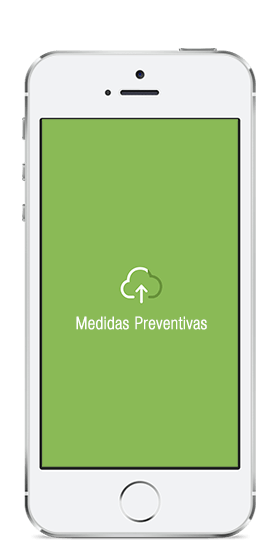
<style>
.page{position:relative;width:280px;height:560px;background:#8aba56}
.page>*{position:absolute;margin:0}
.t1{font:17px "HelveticaNeueLTStd-ThCn";letter-spacing:0.025em;color:#ffffff;font-weight:bold}
</style>
<div class="page">
<p class="t1" style="left:76px;top:316px;width:131px;height:14px">Medidas Preventivas</p>
</div>
